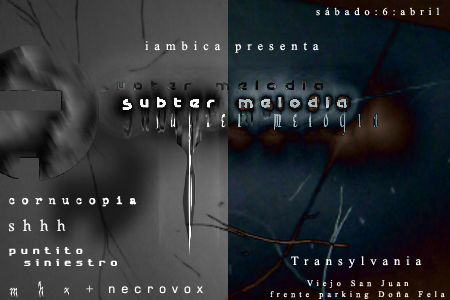
<style>
.page{position:relative;width:450px;height:300px}
.page>*{position:absolute;margin:0}
.t1{font:10.4px "TimesNewRomanPSMT";letter-spacing:0.475em;color:#ffffff}
.t2{font:12.5px "TimesNewRomanPSMT";letter-spacing:0.475em;color:#ffffff}
.t3{font:12.5px "VTCorona";letter-spacing:0.475em;color:#ffffff}
.t4{font:16.7px "Eccentric";letter-spacing:0.475em;color:#ffffff}
.t5{font:10.4px "6809chargen";letter-spacing:0.475em;color:#ffffff}
.t6{font:12.5px "Square721BT-Roman";letter-spacing:0.475em;color:#ffffff}
.t7{font:16.7px "Creepygirl";letter-spacing:0.475em;color:#ffffff}
.t8{font:8.3px "TimesNewRomanPSMT";letter-spacing:0.475em;color:#ffffff}
</style>
<div class="page">
<p class="t1" style="left:316px;top:7px;width:124px;height:9px">sábado:6:abril</p>
<p class="t2" style="left:145px;top:41px;width:174px;height:12px">iambica presenta</p>
<p class="t3" style="left:9px;top:196px;width:128px;height:11px">cornucopia</p>
<p class="t4" style="left:9px;top:219px;width:57px;height:13px">shhh</p>
<p class="t5" style="left:9px;top:247px;width:74px;height:9px">puntito</p>
<p class="t2" style="left:291px;top:256px;width:131px;height:12px">Transylvania</p>
<p class="t5" style="left:24px;top:259px;width:93px;height:7px">siniestro</p>
<p class="t6" style="left:9px;top:281px;width:194px;height:17px"><span class="t7">m h x</span><span class="t2"> + </span>necrovox</p>
<p class="t8" style="left:307px;top:280px;width:102px;height:8px">Viejo San Juan</p>
<p class="t8" style="left:270px;top:291px;width:175px;height:8px">frente parking Doña Fela</p>
</div>
